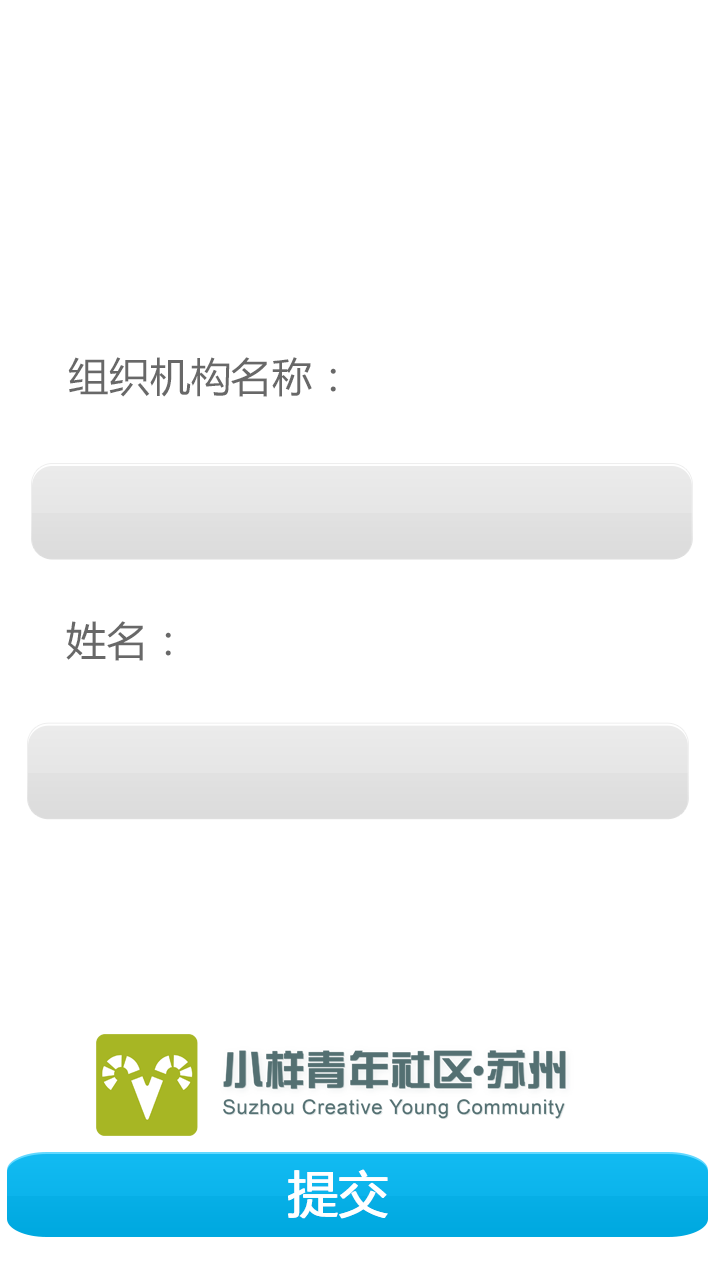
<style>
.page{position:relative;width:720px;height:1280px;background:#ffffff}
.page>*{position:absolute;margin:0}
.t1{font:40.4px "MicrosoftYaHei";letter-spacing:0.01em;color:#686868}
.t2{font:50px "MicrosoftYaHei";letter-spacing:0.01em;color:#ffffff}
</style>
<div class="page">
<p class="t1" style="left:68px;top:357px;width:268px;height:40px">组织机构名称：</p>
<p class="t1" style="left:66px;top:621px;width:105px;height:40px">姓名：</p>
<p class="t2" style="left:288px;top:1169px;width:99px;height:50px">提交</p>
<p class="t2" style="left:289px;top:1169px;width:99px;height:50px">提交</p>
</div>
